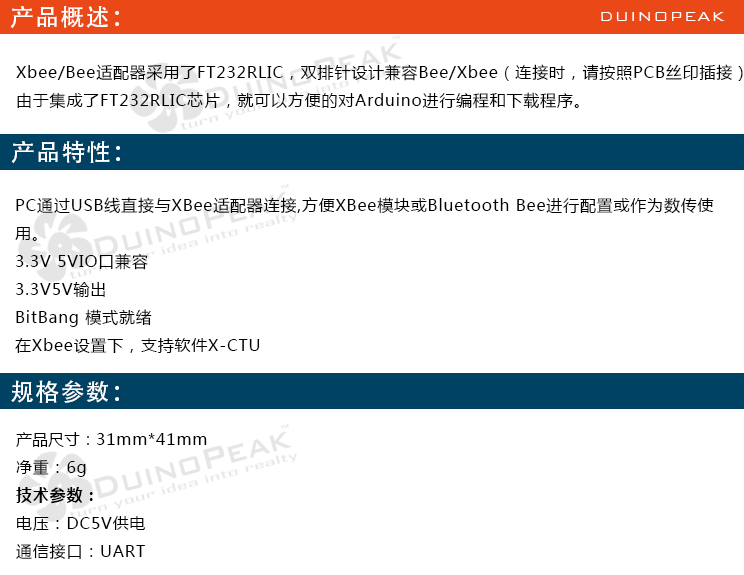
<style>
.page{position:relative;width:744px;height:575px;background:#ffffff}
.page>*{position:absolute;margin:0}
.t1{font:24px "AdobeHeitiStd-Regular";letter-spacing:0.05em;color:#ffffff}
.t2{font:18px "BankGothicBT-Light";letter-spacing:0.05em;color:#ffffff}
.t3{font:16px "MicrosoftYaHei";letter-spacing:0.05em;color:#000000}
.t4{font:16px "MicrosoftYaHei";color:#000000}
.t5{font:16px "MicrosoftYaHei-Bold";letter-spacing:0.05em;color:#000000}
</style>
<div class="page">
<p class="t1" style="left:10px;top:6px;width:109px;height:23px">产品概述：</p>
<p class="t2" style="left:601px;top:12px;width:124px;height:9px">DUINOPEAK</p>
<p class="t3" style="left:16px;top:64px;width:727px;height:45px">Xbee/Bee适配器采用了FT232RLIC，双排针设计兼容Bee/Xbee（连接时，请按照PCB丝印插接）<br>由于集成了FT232RLIC芯片，就可以方便的对Arduino进行编程和下载程序。</p>
<p class="t1" style="left:11px;top:140px;width:109px;height:24px">产品特性：</p>
<p class="t3" style="left:15px;top:197px;width:699px;height:156px">PC通过USB线直接与XBee适配器连接,方便XBee模块或Bluetooth Bee进行配置或作为数传使<br>用。<br>3.3V 5VIO口兼容<br>3.3V5V输出<br>BitBang 模式就绪<br>在Xbee设置下，支持软件X-CTU</p>
<p class="t1" style="left:11px;top:380px;width:108px;height:23px">规格参数：</p>
<p class="t3" style="left:16px;top:432px;width:191px;height:127px"><span class="t4">产品尺寸：</span>31mm*41mm<br>净重：6g<br><span class="t5">技术参数：<br></span>电压：DC5V供电<br>通信接口：UART</p>
</div>
